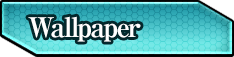
<style>
.page{position:relative;width:234px;height:57px}
.page>*{position:absolute;margin:0}
.t1{font:27px "RyuminPro-ExBold";letter-spacing:-0.08em;color:#ffffff}
</style>
<div class="page">
<p class="t1" style="left:28px;top:16px;width:113px;height:26px">Wallpaper</p>
</div>
